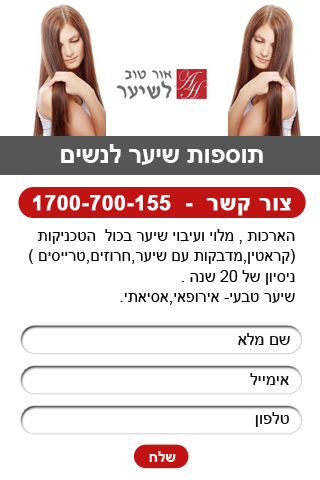
<style>
.page{position:relative;width:320px;height:480px;background:#ffffff}
.page>*{position:absolute;margin:0}
.t1{font:26.1px "Arial-BoldMT";letter-spacing:-0.02em;color:#ffffff}
.t2{font:20.6px "Arial-BoldMT";letter-spacing:0.02em;color:#fcfcfc;font-weight:bold}
.t3{font:23.2px "Arial-BoldMT";letter-spacing:0.02em;color:#fcfcfc;font-weight:bold}
.t4{font:15.9px/20.4px "ArialMT";color:#000000}
.t5{font:16.5px "ArialMT";color:#100f0f}
.t6{font:15px "Arial-BoldMT";color:#ebf3ea}
</style>
<div class="page">
<p class="t1" style="left:61px;top:144px;width:202px;height:21px">תוספות שיער לנשים</p>
<p class="t2" style="left:33px;top:195px;width:258px;height:21px"><span class="t3">צור קשר</span>  -  1700-700-155</p>
<p class="t4" style="left:29px;top:229px;width:266px;height:76px">הארכות , מלוי ועיבוי שיער בכול  הטכניקות <br>(קראטין,מדבקות עם שיער,חרוזים,טרייסים )<br>ניסיון של 20 שנה .<br>שיער טבעי- אירופאי,אסיאתי.</p>
<p class="t5" style="left:238px;top:333px;width:52px;height:12px">שם מלא</p>
<p class="t5" style="left:250px;top:373px;width:39px;height:12px">אימייל</p>
<p class="t5" style="left:255px;top:412px;width:34px;height:15px">טלפון</p>
<p class="t6" style="left:149px;top:451px;width:27px;height:11px">שלח</p>
</div>
